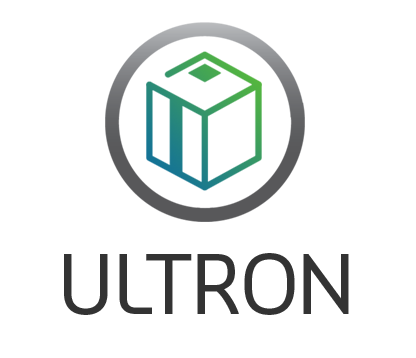
<style>
.page{position:relative;width:416px;height:358px;background:#ffffff}
.page>*{position:absolute;margin:0}
.t1{font:80px "SansaPro-Normal";letter-spacing:-0.03em;color:#333333}
</style>
<div class="page">
<p class="t1" style="left:64px;top:253px;width:285px;height:62px">ULTRON</p>
</div>
